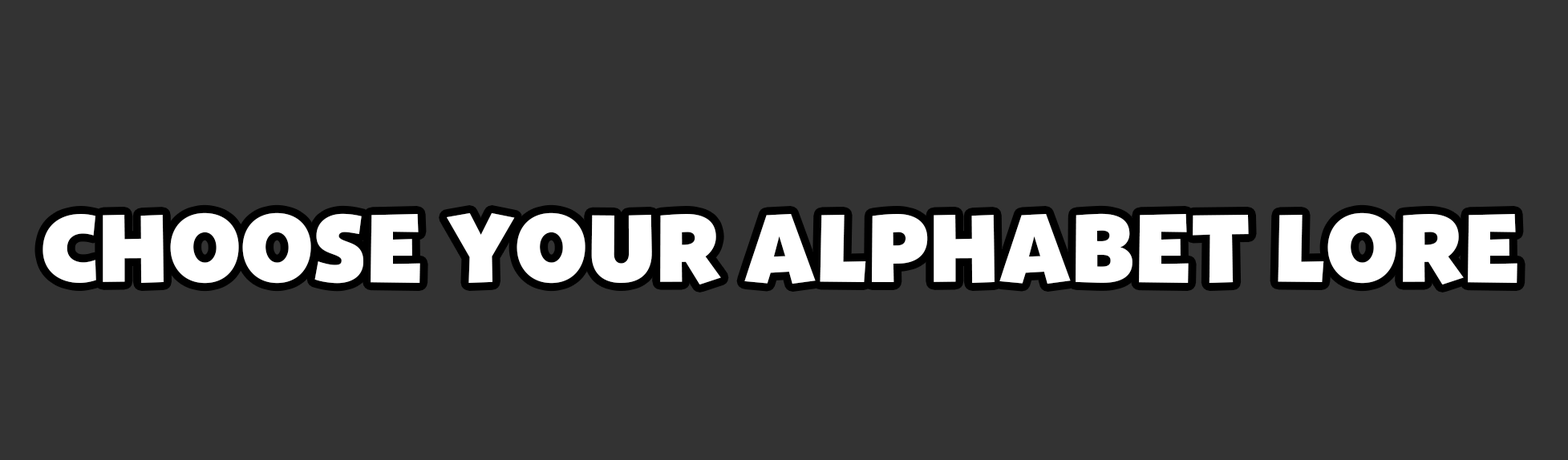
<style>
.page{position:relative;width:1568px;height:460px;background:#333333}
.page>*{position:absolute;margin:0}
.t1{font:96.2px "BangoPro";color:#ffffff}
</style>
<div class="page">
<p class="t1" style="left:43px;top:213px;width:1474px;height:72px">CHOOSE YOUR ALPHABET LORE</p>
</div>
